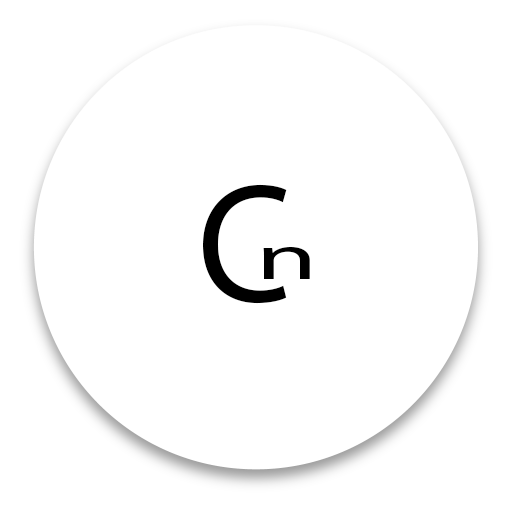
<style>
.page{position:relative;width:512px;height:512px;background:#ffffff}
.page>*{position:absolute;margin:0}
.t1{font:169.6px "MyriadPro-Regular";letter-spacing:-0.22em;color:#000000;scale:0.96 1}
.t2{font:110.1px "MyriadPro-Regular";letter-spacing:-0.22em;color:#000000;scale:1.71 1}
</style>
<div class="page">
<p class="t1" style="left:203px;top:184px;width:107px;height:120px">C<span class="t2">n</span></p>
</div>
